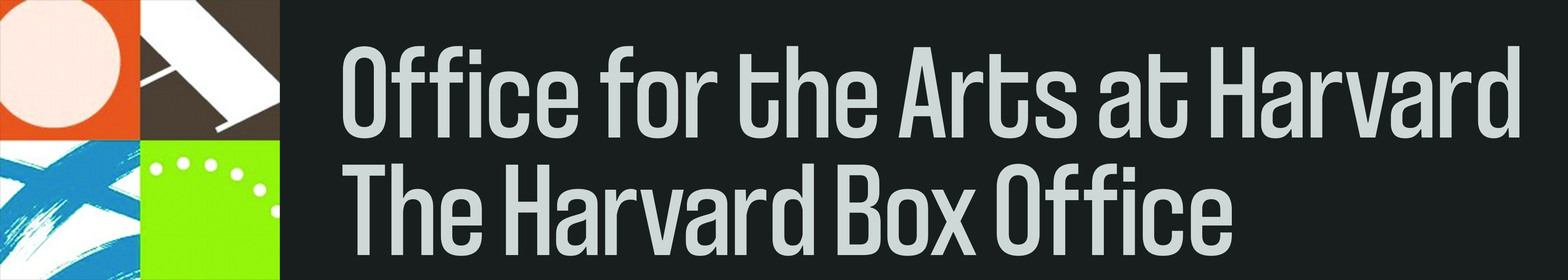
<style>
.page{position:relative;width:1568px;height:280px;background:#181e1e}
.page>*{position:absolute;margin:0}
.t1{font:136.1px/117.2px "CoolveticaCondensedRg-Regular";color:#cdd8d7}
</style>
<div class="page">
<p class="t1" style="left:342px;top:46px;width:1177px;height:210px">Office for the Arts at Harvard<br>The Harvard Box Office</p>
</div>
